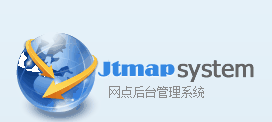
<style>
.page{position:relative;width:272px;height:122px;background:#e4f1f9}
.page>*{position:absolute;margin:0}
.t1{font:20.3px "Broadway";color:#3488e3;font-weight:bold}
.t2{font:12px "NSimSun";color:#8b8b8b}
</style>
<div class="page">
<p class="t1" style="left:98px;top:61px;width:77px;height:16px">Jtmap</p>
<p class="t2" style="left:109px;top:86px;width:95px;height:12px">网点后台管理系统</p>
</div>
